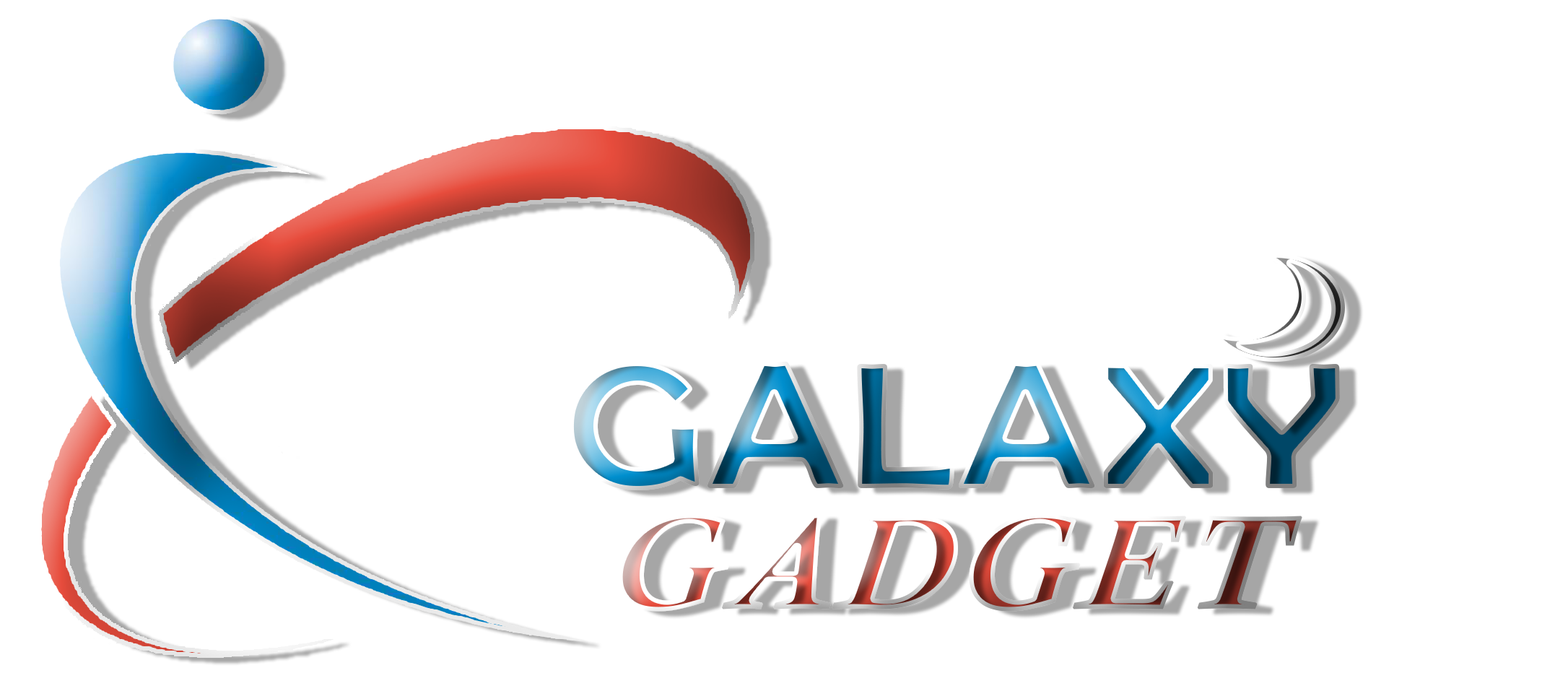
<style>
.page{position:relative;width:1568px;height:673px;background:#ffffff}
.page>*{position:absolute;margin:0}
.t1{font:176.6px "BerlinSansFB-Reg";font-weight:bold;scale:1.15 1}
.t2{font:133.3px "CalistoMT-BoldItalic";font-weight:bold;scale:1.15 1}
</style>
<div class="page">
<p class="t1" style="left:569px;top:361px;width:771px;height:129px">GALAXY</p>
<p class="t2" style="left:618px;top:513px;width:684px;height:98px">GADGET</p>
</div>
